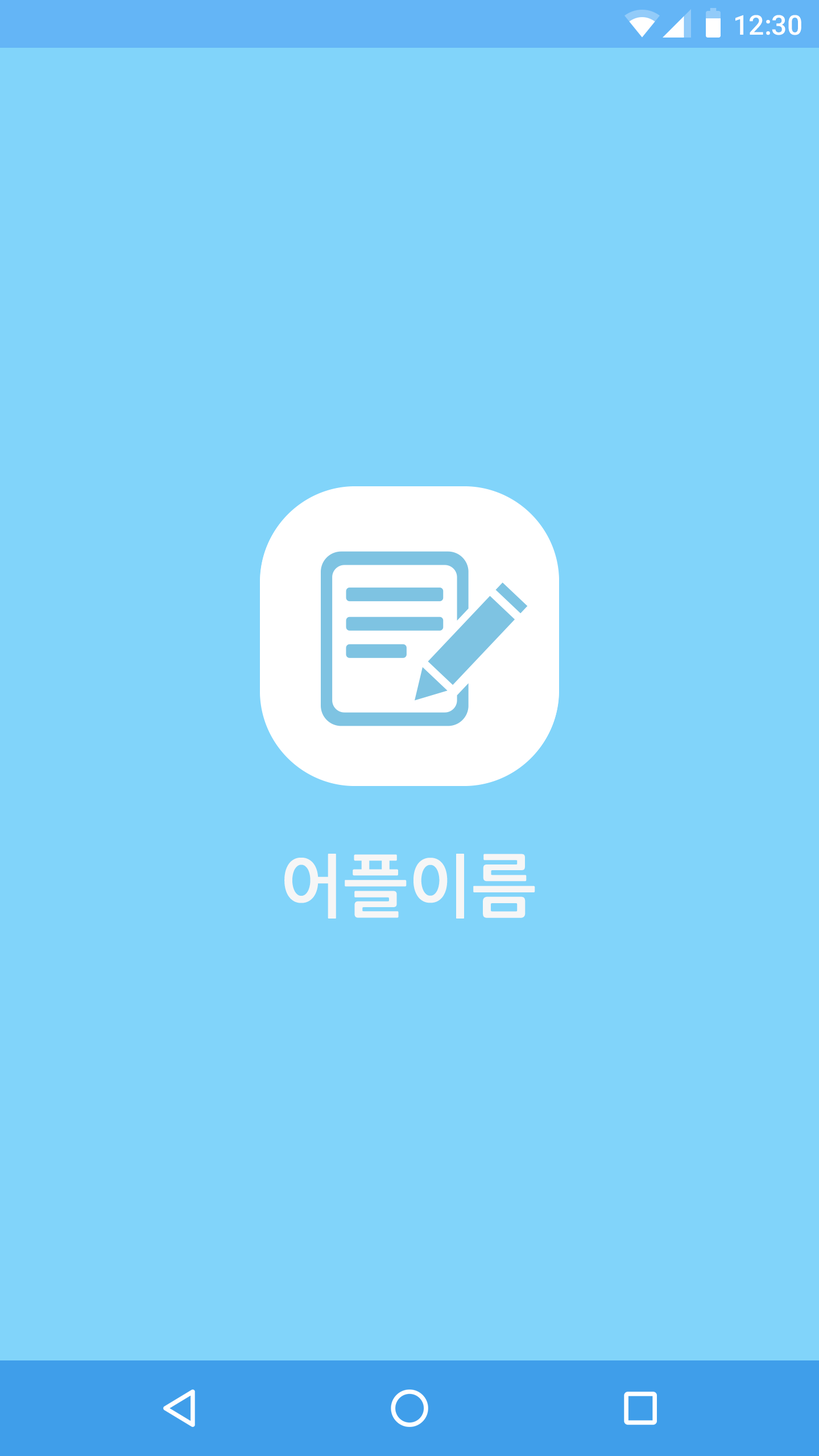
<style>
.page{position:relative;width:819px;height:1456px;background:#81d4fa}
.page>*{position:absolute;margin:0}
.t1{font:27.3px "Roboto-Medium";color:#ffffff}
.t2{font:68.2px "NanumGothicBold";color:#f6f6f6}
</style>
<div class="page">
<p class="t1" style="left:735px;top:15px;width:66px;height:20px">12:30</p>
<p class="t2" style="left:284px;top:854px;width:251px;height:65px">어플이름</p>
</div>
